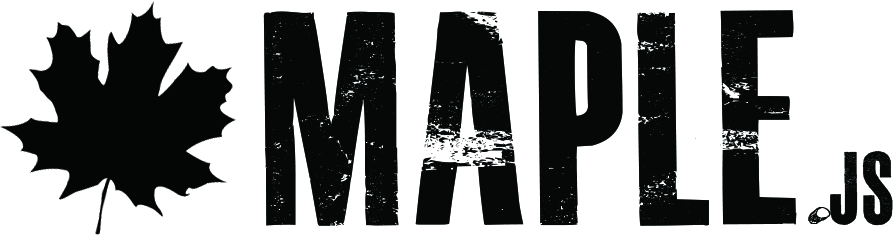
<style>
.page{position:relative;width:893px;height:235px;background:#ffffff}
.page>*{position:absolute;margin:0}
.t1{font:300px "MASTERPLAN-TRIAL";color:#060808}
.t2{font:100px "orangejuice";color:#060808}
.t3{font:100px "MASTERPLAN-TRIAL";color:#060808}
</style>
<div class="page">
<p class="t1" style="left:263px;top:10px;width:630px;height:216px">Maple<span class="t2">.</span><span class="t3">js</span></p>
</div>
